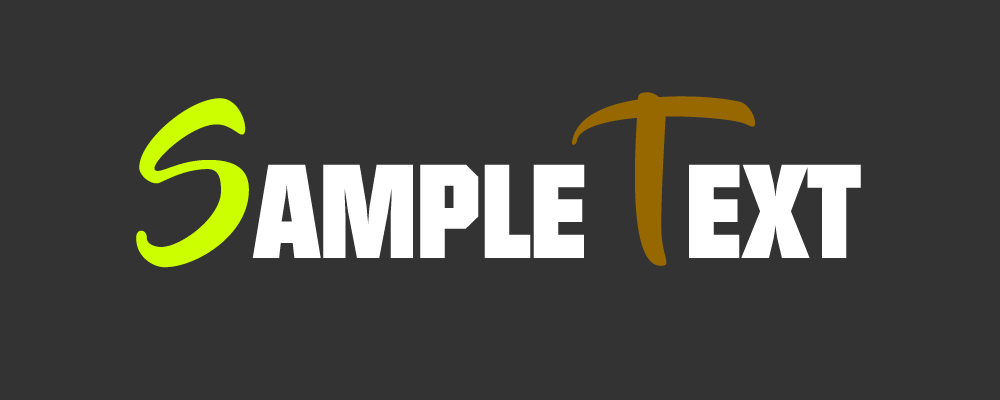
<style>
.page{position:relative;width:1000px;height:400px;background:#333333}
.page>*{position:absolute;margin:0}
.t1{font:129.2px "Autumn";color:#ffffff}
.t2{font:162.5px "BeyondTheMountains";color:#ccff00}
.t3{font:170.8px "BeyondTheMountains";color:#986800}
</style>
<div class="page">
<p class="t1" style="left:136px;top:92px;width:725px;height:176px"><span class="t2">S</span>AMPLE <span class="t3">T</span>EXT</p>
</div>
